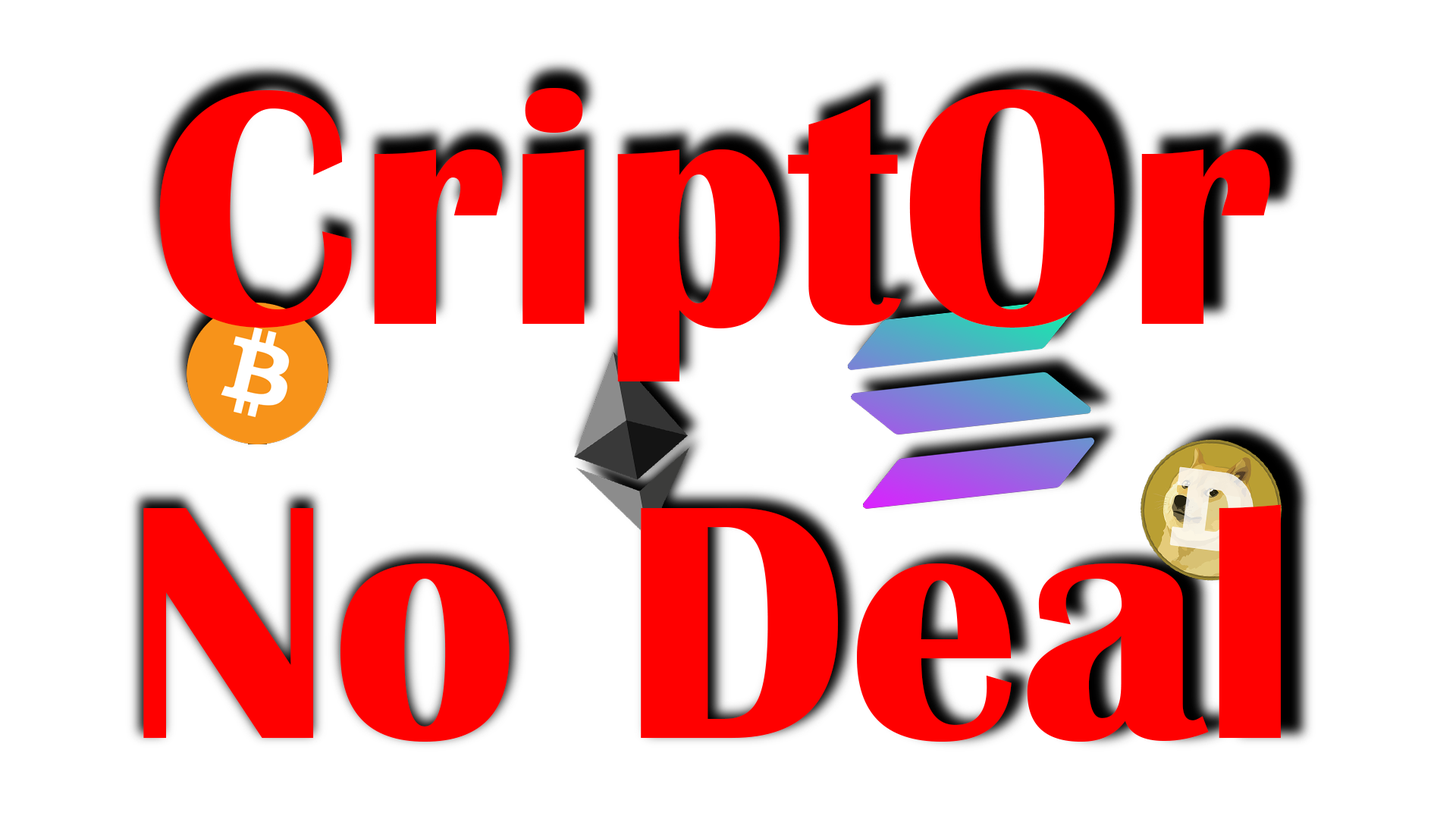
<style>
.page{position:relative;width:1456px;height:819px;background:#ffffff}
.page>*{position:absolute;margin:0}
.t1{font:345px "BritannicBold";color:#ff0000}
</style>
<div class="page">
<p class="t1" style="left:143px;top:88px;width:1138px;height:654px;text-align:center">CriptOr <br>No Deal</p>
</div>
